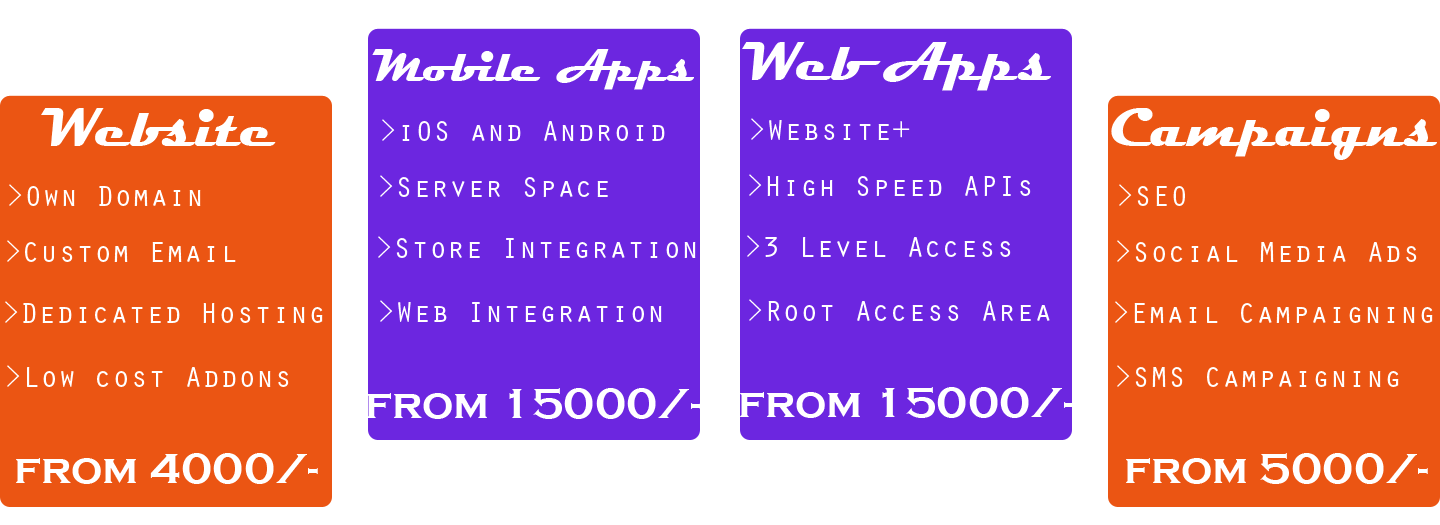
<style>
.page{position:relative;width:1440px;height:525px;background:#eb5513}
.page>*{position:absolute;margin:0}
.t1{font:46px "Magneto-Bold";color:#ffffff}
.t2{font:56px "Magneto-Bold";color:#ffffff}
.t3{font:30px "OratorStd";color:#ffffff}
.t4{font:44px "CopperplateGothic-Bold";color:#ffffff}
</style>
<div class="page">
<p class="t1" style="left:372px;top:49px;width:322px;height:41px">Mobile Apps</p>
<p class="t2" style="left:742px;top:42px;width:309px;height:49px">Web Apps</p>
<p class="t2" style="left:41px;top:108px;width:235px;height:38px">Website</p>
<p class="t2" style="left:1111px;top:108px;width:326px;height:52px">Campaigns</p>
<p class="t3" style="left:382px;top:119px;width:283px;height:22px">&gt;iOS and Android</p>
<p class="t3" style="left:751px;top:118px;width:159px;height:22px">&gt;Website+</p>
<p class="t3" style="left:749px;top:174px;width:282px;height:22px">&gt;High Speed APIs</p>
<p class="t3" style="left:9px;top:184px;width:192px;height:22px">&gt;Own Domain</p>
<p class="t3" style="left:380px;top:175px;width:228px;height:22px">&gt;Server Space</p>
<p class="t3" style="left:1119px;top:184px;width:66px;height:22px">&gt;SEO</p>
<p class="t3" style="left:7px;top:240px;width:229px;height:22px">&gt;Custom Email</p>
<p class="t3" style="left:378px;top:236px;width:318px;height:22px">&gt;Store Integration</p>
<p class="t3" style="left:747px;top:235px;width:264px;height:22px">&gt;3 Level Access</p>
<p class="t3" style="left:1117px;top:240px;width:300px;height:22px">&gt;Social Media Ads</p>
<p class="t3" style="left:5px;top:301px;width:318px;height:22px">&gt;Dedicated Hosting</p>
<p class="t3" style="left:380px;top:300px;width:282px;height:22px">&gt;Web Integration</p>
<p class="t3" style="left:749px;top:299px;width:301px;height:22px">&gt;Root Access Area</p>
<p class="t3" style="left:1115px;top:301px;width:318px;height:22px">&gt;Email Campaigning</p>
<p class="t3" style="left:7px;top:365px;width:282px;height:22px">&gt;Low cost Addons</p>
<p class="t3" style="left:1117px;top:365px;width:282px;height:22px">&gt;SMS Campaigning</p>
<p class="t4" style="left:367px;top:388px;width:334px;height:31px">from 15000/-</p>
<p class="t4" style="left:740px;top:387px;width:334px;height:31px">from 15000/-</p>
<p class="t4" style="left:16px;top:453px;width:302px;height:31px">from 4000/-</p>
<p class="t4" style="left:1126px;top:453px;width:302px;height:31px">from 5000/-</p>
</div>
